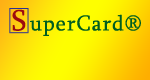
<style>
.page{position:relative;width:150px;height:80px}
.page>*{position:absolute;margin:0}
.t1{font:30px "Sylfaen";letter-spacing:0.05em;color:#9e0b0f}
.t2{font:22px "Sylfaen";letter-spacing:0.05em;color:#005e20}
</style>
<div class="page">
<p class="t1" style="left:12px;top:9px;width:14px;height:22px">S</p>
<p class="t2" style="left:30px;top:14px;width:111px;height:22px">uperCard®</p>
</div>
